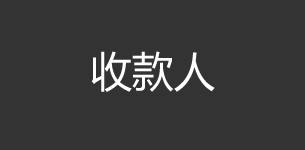
<style>
.page{position:relative;width:305px;height:150px;background:#333333}
.page>*{position:absolute;margin:0}
.t1{font:41.7px "MicrosoftYaHei";color:#ffffff}
</style>
<div class="page">
<p class="t1" style="left:91px;top:51px;width:124px;height:41px">收款人</p>
</div>
